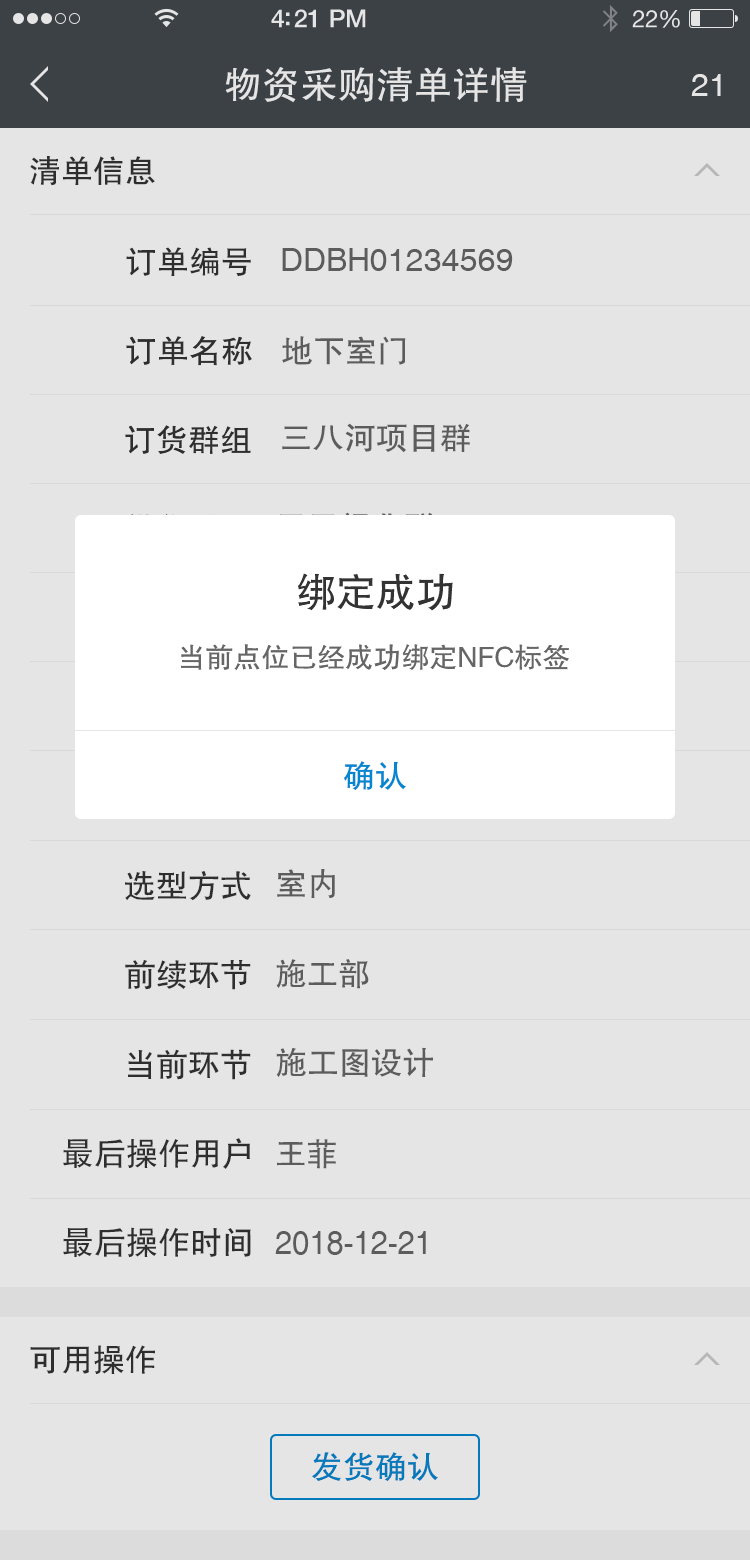
<style>
.page{position:relative;width:750px;height:1560px;background:#e5e5e5}
.page>*{position:absolute;margin:0}
.t1{font:38px "FZHTJW--GB1-0";color:#e5e5e5}
.t2{font:32px "Helvetica";color:#e5e5e5}
.t3{font:32px "FZHTJW--GB1-0";color:#333333}
.t4{font:32px "Helvetica";color:#666666}
.t5{font:32px "FZHTJW--GB1-0";color:#666666}
.t6{font:40px "FZHTJW--GB1-0";color:#333333}
.t7{font:28px "FZHTJW--GB1-0";color:#666666}
.t8{font:32px "FZHTJW--GB1-0";color:#0487d0}
.t9{font:32.3px "FZHTJW--GB1-0";color:#666666}
.t10{font:32.3px "FZHTJW--GB1-0";color:#333333}
.t11{font:32.4px "FZHTJW--GB1-0";color:#333333}
.t12{font:32.4px "FZHTJW--GB1-0";color:#666666}
.t13{font:32.6px "FZHTJW--GB1-0";color:#333333}
.t14{font:32.8px "FZHTJW--GB1-0";color:#333333}
</style>
<div class="page">
<p class="t1" style="left:225px;top:67px;width:302px;height:36px">物资采购清单详情</p>
<p class="t2" style="left:691px;top:74px;width:30px;height:22px">21</p>
<p class="t3" style="left:30px;top:156px;width:125px;height:30px">清单信息</p>
<p class="t3" style="left:126px;top:247px;width:125px;height:29px">订单编号</p>
<p class="t4" style="left:282px;top:248px;width:231px;height:23px">DDBH01234569</p>
<p class="t3" style="left:126px;top:336px;width:126px;height:30px">订单名称</p>
<p class="t5" style="left:282px;top:336px;width:124px;height:29px">地下室门</p>
<p class="t3" style="left:125px;top:425px;width:126px;height:29px">订货群组</p>
<p class="t5" style="left:282px;top:423px;width:188px;height:30px">三八河项目群</p>
<p class="t6" style="left:298px;top:573px;width:155px;height:38px">绑定成功</p>
<p class="t7" style="left:181px;top:644px;width:388px;height:26px">当前点位已经成功绑定NFC标签</p>
<p class="t8" style="left:344px;top:761px;width:62px;height:29px">确认</p>
<p class="t9" style="left:277px;top:869px;width:58px;height:30px">室内</p>
<p class="t10" style="left:125px;top:871px;width:126px;height:30px">选型方式</p>
<p class="t10" style="left:125px;top:960px;width:126px;height:30px">前续环节</p>
<p class="t5" style="left:276px;top:959px;width:93px;height:30px">施工部</p>
<p class="t11" style="left:128px;top:1049px;width:123px;height:31px">当前环节</p>
<p class="t12" style="left:276px;top:1047px;width:157px;height:30px">施工图设计</p>
<p class="t13" style="left:63px;top:1138px;width:187px;height:31px">最后操作用户</p>
<p class="t5" style="left:277px;top:1139px;width:59px;height:30px">王菲</p>
<p class="t14" style="left:63px;top:1227px;width:188px;height:30px">最后操作时间</p>
<p class="t4" style="left:275px;top:1231px;width:151px;height:24px">2018-12-21</p>
<p class="t3" style="left:30px;top:1345px;width:125px;height:29px">可用操作</p>
<p class="t8" style="left:312px;top:1452px;width:126px;height:29px">发货确认</p>
</div>
